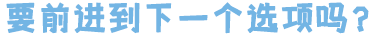
<style>
.page{position:relative;width:375px;height:36px;background:#ffffff}
.page>*{position:absolute;margin:0}
.t1{font:33.7px "shetumodengxiaofangti";color:#73b5e4;font-weight:bold}
</style>
<div class="page">
<p class="t1" style="left:6px;top:2px;width:363px;height:32px">要前进到下一个选项吗？</p>
</div>
